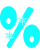
<style>
.page{position:relative;width:40px;height:50px;background:#ffffff}
.page>*{position:absolute;margin:0}
.t1{font:65px "winterflakes";color:#0ffcff}
</style>
<div class="page">
<p class="t1" style="left:0px;top:6px;width:40px;height:42px">%</p>
</div>
